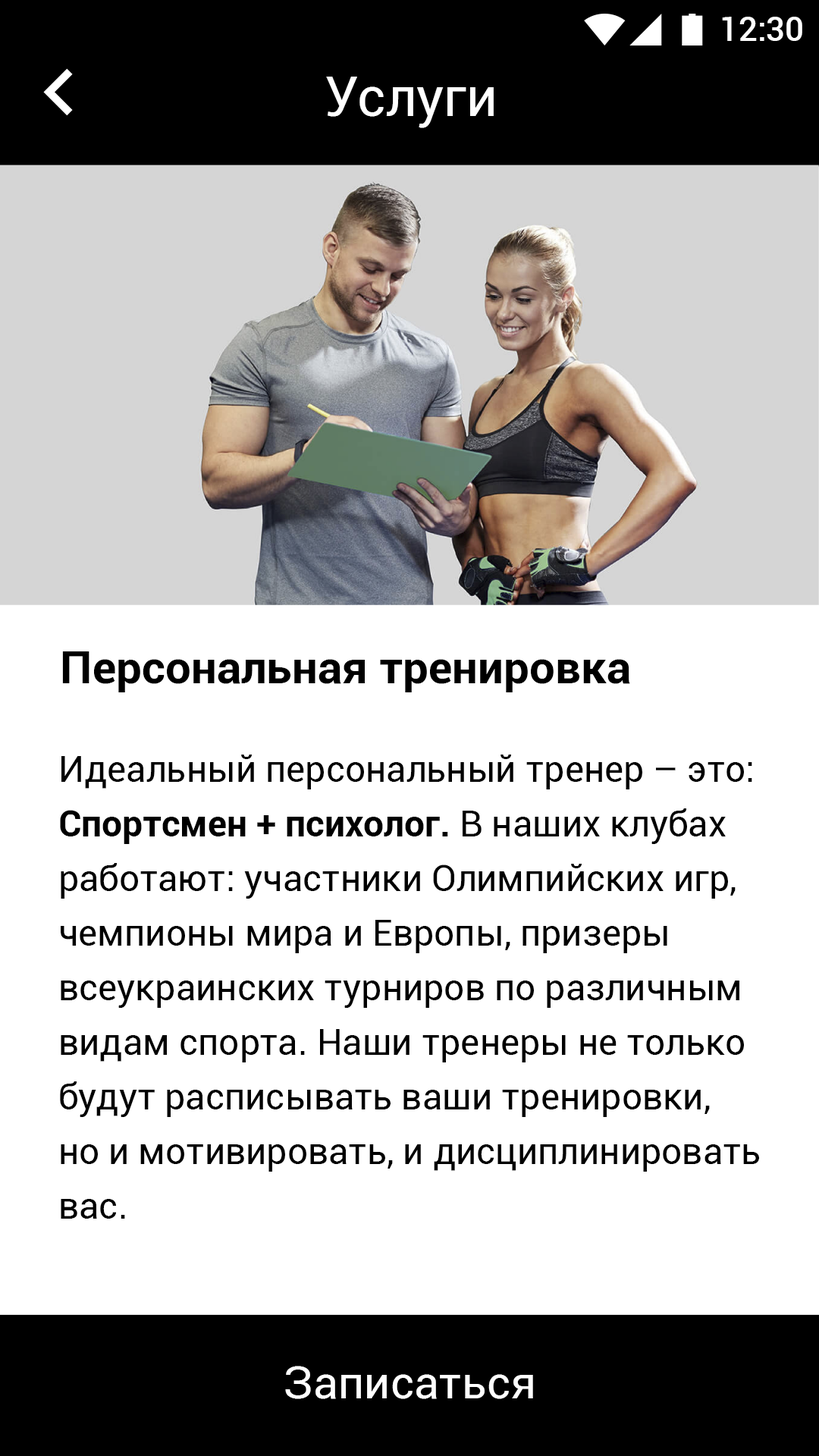
<style>
.page{position:relative;width:819px;height:1456px;background:#ffffff}
.page>*{position:absolute;margin:0}
.t1{font:33.4px "Roboto-Medium";color:#ffffff}
.t2{font:54.6px "Roboto-Regular";color:#ffffff}
.t3{font:45.5px "Roboto-Bold";color:#000000}
.t4{font:36.4px/54.6px "Roboto-Regular";color:#000000}
.t5{font:36.4px "Roboto-Regular";color:#000000}
.t6{font:36.4px/54.6px "Roboto-Bold";color:#000000}
.t7{font:45.5px "Roboto-Regular";color:#ffffff}
</style>
<div class="page">
<p class="t1" style="left:722px;top:17px;width:80px;height:24px">12:30</p>
<p class="t2" style="left:326px;top:77px;width:168px;height:51px">Услуги</p>
<p class="t3" style="left:62px;top:651px;width:568px;height:41px">Персональная тренировка</p>
<p class="t4" style="left:60px;top:755px;width:699px;height:464px"><span class="t5">Идеальный персональный тренер – это:<br></span><span class="t6">Спортсмен + психолог.</span> В наших клубах <br>работают: участники Олимпийских игр, <br>чемпионы мира и Европы, призеры <br>всеукраинских турниров по различным <br>видам спорта. Наши тренеры не только <br>будут расписывать ваши тренировки, <br>но и мотивировать, и дисциплинировать <br>вас.</p>
<p class="t7" style="left:285px;top:1366px;width:248px;height:33px">Записаться</p>
</div>
